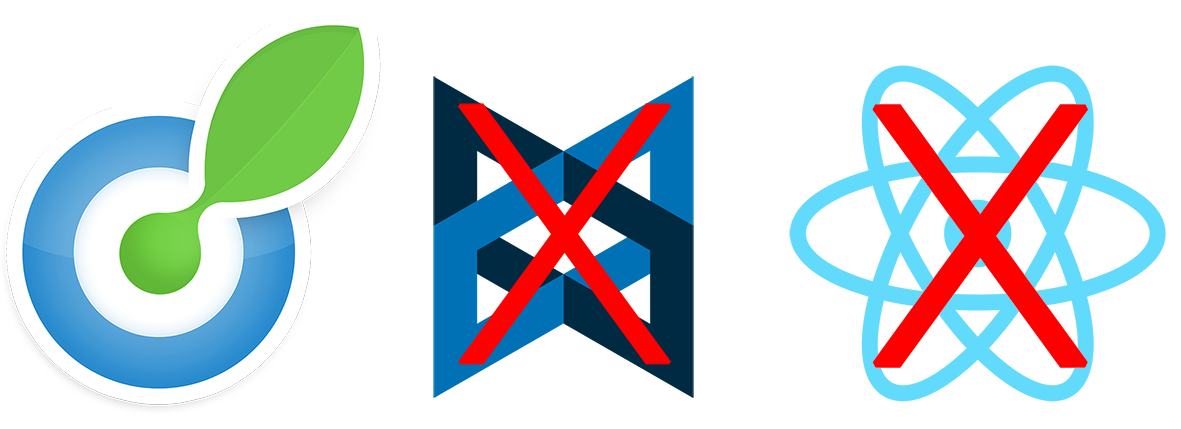
<style>
.page{position:relative;width:1181px;height:429px;background:#ffffff}
.page>*{position:absolute;margin:0}
.t1{font:479.7px "Microsoft-Yi-Baiti";color:#ff0000;font-weight:bold}
</style>
<div class="page">
<p class="t1" style="left:872px;top:104px;width:216px;height:264px">X</p>
</div>
